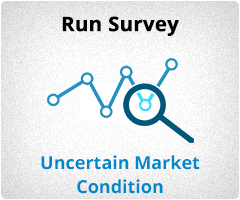
<style>
.page{position:relative;width:240px;height:200px}
.page>*{position:absolute;margin:0}
.t1{font:20px "OpenSans-Bold";color:#000000;font-weight:bold}
.t2{font:18px/24px "OpenSans-Bold";color:#0088cc}
</style>
<div class="page">
<p class="t1" style="left:62px;top:16px;width:117px;height:20px">Run Survey</p>
<p class="t2" style="left:41px;top:155px;width:159px;height:39px;text-align:center">Uncertain Market<br>Condition</p>
</div>
